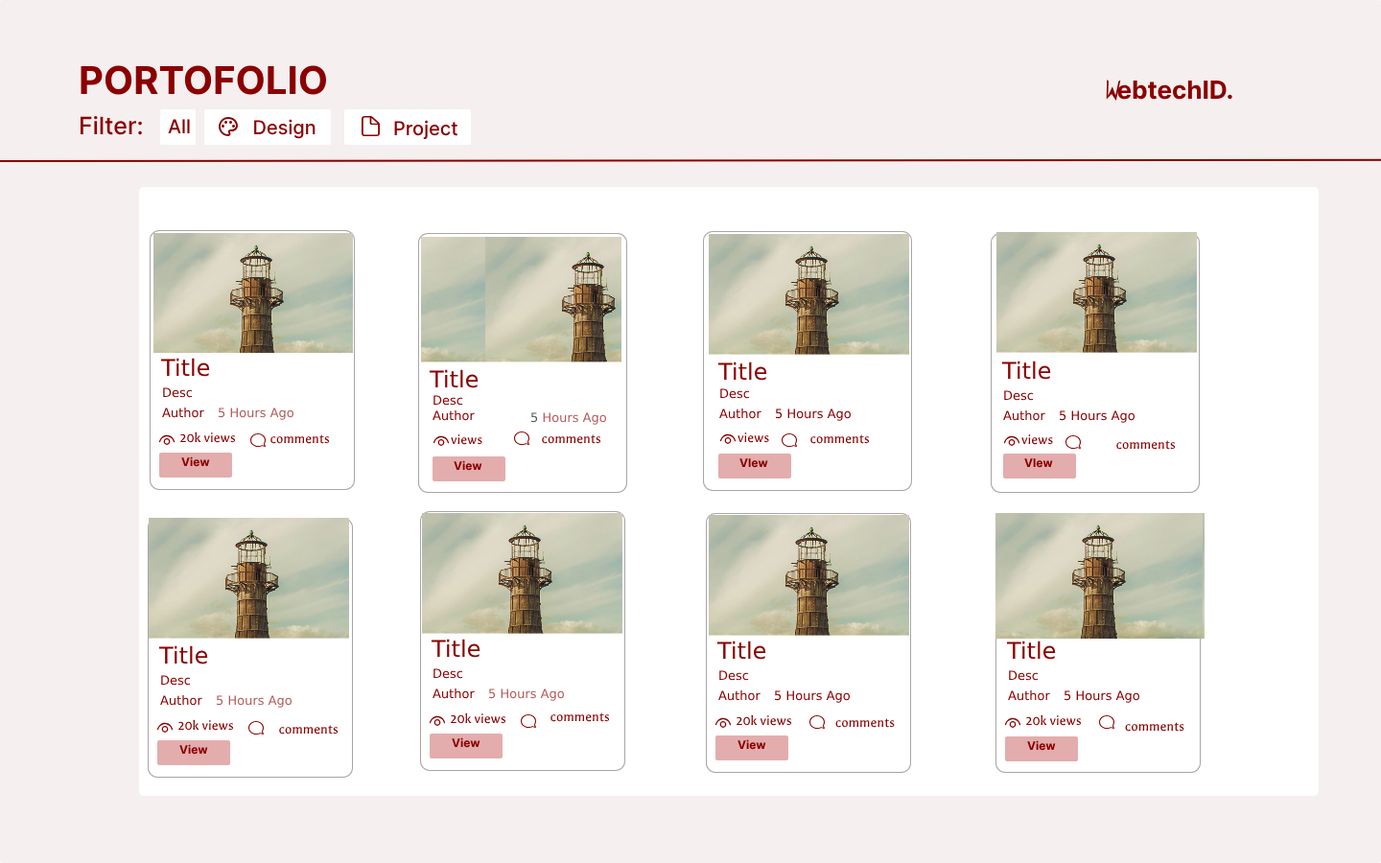
<style>
.page{position:relative;width:1381px;height:863px;background:#ffffff}
.page>*{position:absolute;margin:0}
.t1{font:38.4px "Inter-Bold";color:#8b0000}
.t2{font:24.9px "Inter-Bold";color:#8b0000}
.t3{font:24px "Inter-Medium";color:#8b0000}
.t4{font:19.2px "Inter-Medium";color:#8b0000}
.t5{font:23px "SouliyoUnicode";color:#8b0000}
.t6{font:12.5px "SouliyoUnicode";color:#8b0000}
.t7{font:12.5px "SouliyoUnicode";color:#b45c5c}
.t8{font:14.4px "Galdeano-Regular";color:#8b0000}
.t9{font:11.5px "Inter-Bold";color:#8b0000}
</style>
<div class="page">
<p class="t1" style="left:81px;top:65px;width:246px;height:30px">PORTOFOLIO</p>
<p class="t2" style="left:1117px;top:81px;width:116px;height:19px">ebtechID.</p>
<p class="t3" style="left:80px;top:116px;width:62px;height:19px">Filter:</p>
<p class="t4" style="left:168px;top:119px;width:22px;height:14px">All</p>
<p class="t4" style="left:254px;top:119px;width:62px;height:20px">Design</p>
<p class="t4" style="left:394px;top:120px;width:64px;height:20px">Project</p>
<p class="t5" style="left:160px;top:358px;width:50px;height:19px">Title</p>
<p class="t5" style="left:717px;top:362px;width:50px;height:19px">Title</p>
<p class="t5" style="left:1001px;top:361px;width:50px;height:19px">Title</p>
<p class="t5" style="left:429px;top:369px;width:50px;height:19px">Title</p>
<p class="t6" style="left:163px;top:388px;width:30px;height:10px">Desc</p>
<p class="t6" style="left:720px;top:388px;width:30px;height:11px">Desc</p>
<p class="t6" style="left:434px;top:395px;width:29px;height:11px">Desc</p>
<p class="t6" style="left:1004px;top:390px;width:30px;height:11px">Desc</p>
<p class="t6" style="left:162px;top:408px;width:42px;height:10px">Author</p>
<p class="t7" style="left:219px;top:408px;width:75px;height:12px">5 Hours Ago</p>
<p class="t6" style="left:433px;top:411px;width:42px;height:10px">Author</p>
<p class="t7" style="left:531px;top:412px;width:76px;height:13px">5 Hours Ago</p>
<p class="t6" style="left:719px;top:409px;width:43px;height:10px">Author</p>
<p class="t6" style="left:776px;top:409px;width:76px;height:12px">5 Hours Ago</p>
<p class="t6" style="left:1003px;top:411px;width:43px;height:10px">Author</p>
<p class="t6" style="left:1060px;top:411px;width:76px;height:12px">5 Hours Ago</p>
<p class="t8" style="left:180px;top:432px;width:56px;height:11px">20k views</p>
<p class="t8" style="left:270px;top:435px;width:60px;height:9px">comments</p>
<p class="t8" style="left:451px;top:434px;width:31px;height:11px">views</p>
<p class="t8" style="left:542px;top:435px;width:59px;height:9px">comments</p>
<p class="t8" style="left:738px;top:432px;width:31px;height:11px">views</p>
<p class="t8" style="left:811px;top:435px;width:59px;height:9px">comments</p>
<p class="t8" style="left:1022px;top:434px;width:31px;height:11px">views</p>
<p class="t8" style="left:1117px;top:440px;width:59px;height:10px">comments</p>
<p class="t9" style="left:181px;top:457px;width:29px;height:10px">View</p>
<p class="t9" style="left:454px;top:460px;width:28px;height:11px">View</p>
<p class="t9" style="left:740px;top:459px;width:28px;height:9px">VIew</p>
<p class="t9" style="left:1024px;top:459px;width:29px;height:9px">VIew</p>
<p class="t5" style="left:431px;top:639px;width:50px;height:19px">Title</p>
<p class="t5" style="left:717px;top:641px;width:49px;height:19px">Title</p>
<p class="t5" style="left:1006px;top:641px;width:50px;height:19px">Title</p>
<p class="t5" style="left:158px;top:646px;width:50px;height:19px">Title</p>
<p class="t6" style="left:161px;top:675px;width:30px;height:11px">Desc</p>
<p class="t6" style="left:434px;top:669px;width:29px;height:10px">Desc</p>
<p class="t6" style="left:719px;top:670px;width:30px;height:11px">Desc</p>
<p class="t6" style="left:1009px;top:670px;width:30px;height:11px">Desc</p>
<p class="t6" style="left:433px;top:689px;width:42px;height:10px">Author</p>
<p class="t7" style="left:489px;top:689px;width:76px;height:12px">5 Hours Ago</p>
<p class="t6" style="left:160px;top:695px;width:42px;height:11px">Author</p>
<p class="t7" style="left:217px;top:695px;width:76px;height:13px">5 Hours Ago</p>
<p class="t6" style="left:718px;top:691px;width:43px;height:10px">Author</p>
<p class="t6" style="left:775px;top:691px;width:76px;height:12px">5 Hours Ago</p>
<p class="t6" style="left:1008px;top:691px;width:42px;height:10px">Author</p>
<p class="t6" style="left:1065px;top:691px;width:76px;height:12px">5 Hours Ago</p>
<p class="t8" style="left:451px;top:713px;width:55px;height:11px">20k views</p>
<p class="t8" style="left:551px;top:713px;width:59px;height:9px">comments</p>
<p class="t8" style="left:178px;top:719px;width:56px;height:12px">20k views</p>
<p class="t8" style="left:279px;top:725px;width:60px;height:10px">comments</p>
<p class="t8" style="left:737px;top:715px;width:55px;height:11px">20k views</p>
<p class="t8" style="left:835px;top:718px;width:60px;height:10px">comments</p>
<p class="t8" style="left:1026px;top:715px;width:56px;height:11px">20k views</p>
<p class="t8" style="left:1125px;top:722px;width:60px;height:10px">comments</p>
<p class="t9" style="left:452px;top:738px;width:29px;height:10px">View</p>
<p class="t9" style="left:179px;top:744px;width:29px;height:11px">View</p>
<p class="t9" style="left:738px;top:740px;width:28px;height:10px">View</p>
<p class="t9" style="left:1027px;top:741px;width:29px;height:10px">View</p>
</div>
